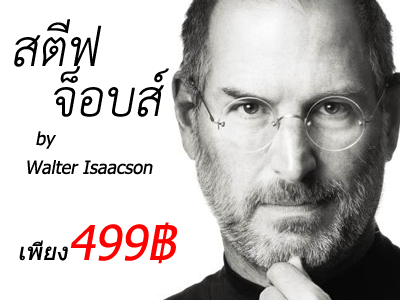
<style>
.page{position:relative;width:400px;height:300px;background:#ffffff}
.page>*{position:absolute;margin:0}
.t1{font:72px "THSarabunPSK";color:#000000;font-style:italic}
.t2{font:18px "Tahoma";color:#000000;font-style:italic}
.t3{font:24px "Tahoma";color:#000000;font-style:italic}
.t4{font:48px "Tahoma";color:#ff0000;font-style:italic}
</style>
<div class="page">
<p class="t1" style="left:14px;top:19px;width:88px;height:48px">สตีฟ</p>
<p class="t1" style="left:54px;top:66px;width:115px;height:51px">จ็อบส์</p>
<p class="t2" style="left:27px;top:131px;width:126px;height:44px;text-align:center">by<br>Walter Isaacson</p>
<p class="t3" style="left:19px;top:222px;width:159px;height:42px">เพียง<span class="t4">499฿</span></p>
</div>
